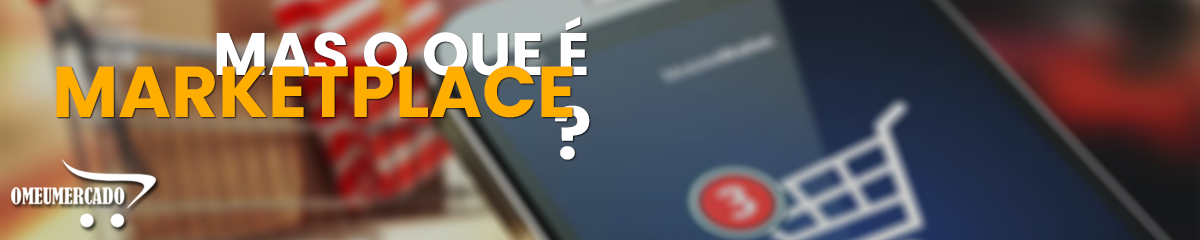
<style>
.page{position:relative;width:1200px;height:240px}
.page>*{position:absolute;margin:0}
.t1{font:60px "Poppins-Bold";color:#ffffff}
.t2{font:72px "Poppins-Bold";color:#ffae00}
.t3{font:72px "Poppins-Bold";color:#ffffff}
</style>
<div class="page">
<p class="t1" style="left:216px;top:16px;width:371px;height:67px">MAS O QUE É</p>
<p class="t2" style="left:56px;top:66px;width:517px;height:52px">MARKETPLACE</p>
<p class="t3" style="left:555px;top:105px;width:35px;height:55px">?</p>
</div>
